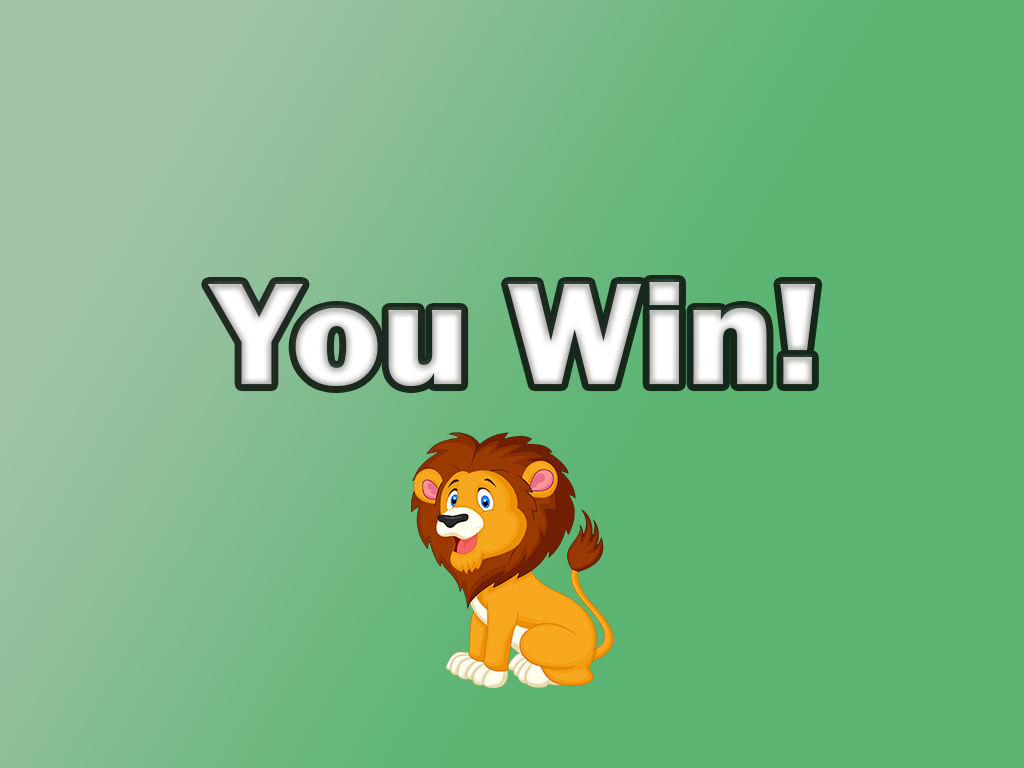
<style>
.page{position:relative;width:1024px;height:768px;background:#5db574}
.page>*{position:absolute;margin:0}
.t1{font:150px "FranklinGothic-Heavy";color:#ffffff}
</style>
<div class="page">
<p class="t1" style="left:208px;top:282px;width:608px;height:104px">You Win!</p>
</div>
